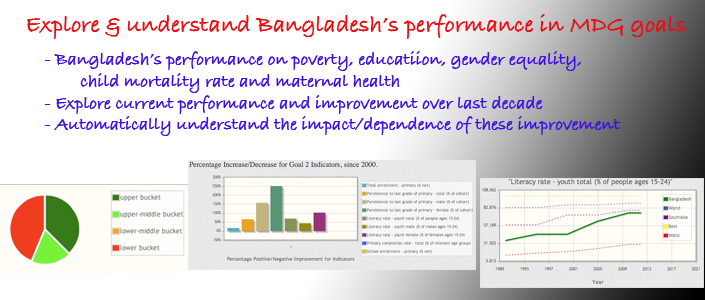
<style>
.page{position:relative;width:705px;height:300px;background:#ffffff}
.page>*{position:absolute;margin:0}
.t1{font:24px "BradleyHandITCTTBold";color:#ea0e13}
.t2{font:18px "BradleyHandITCTTBold";color:#3c0eea}
</style>
<div class="page">
<p class="t1" style="left:27px;top:14px;width:659px;height:25px">Explore &amp; understand Bangladesh’s performance in MDG goals</p>
<p class="t2" style="left:44px;top:51px;width:577px;height:85px">- Bangladesh’s performance on poverty, educatiion, gender equality, <br> child mortality rate and maternal health<br>- Explore current performance and improvement over last decade<br>- Automatically understand the impact/dependence of these improvement</p>
</div>
